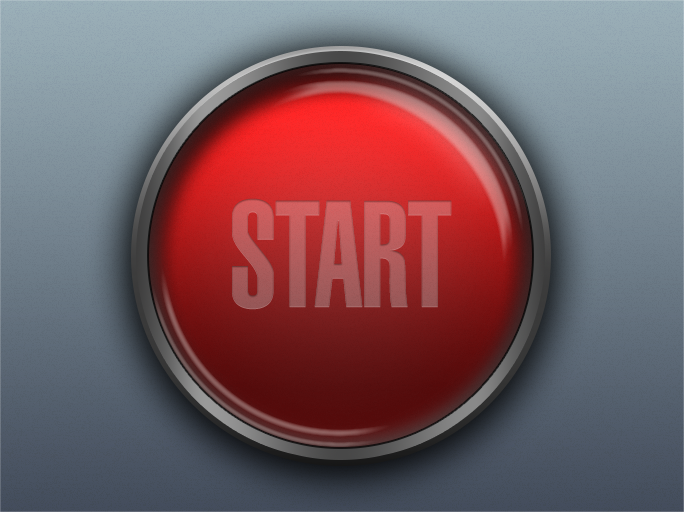
<style>
.page{position:relative;width:684px;height:512px}
.page>*{position:absolute;margin:0}
.t1{font:148px "HelveticaLTStd-UltraComp";letter-spacing:-0.015em;text-transform:uppercase}
</style>
<div class="page">
<p class="t1" style="left:232px;top:198px;width:220px;height:111px">start</p>
</div>
